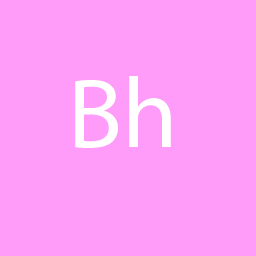
<style>
.page{position:relative;width:256px;height:256px;background:#ff9bf9}
.page>*{position:absolute;margin:0}
.t1{font:100px "MyriadPro-Regular";color:#ffffff}
</style>
<div class="page">
<p class="t1" style="left:75px;top:76px;width:96px;height:72px">Bh</p>
</div>
